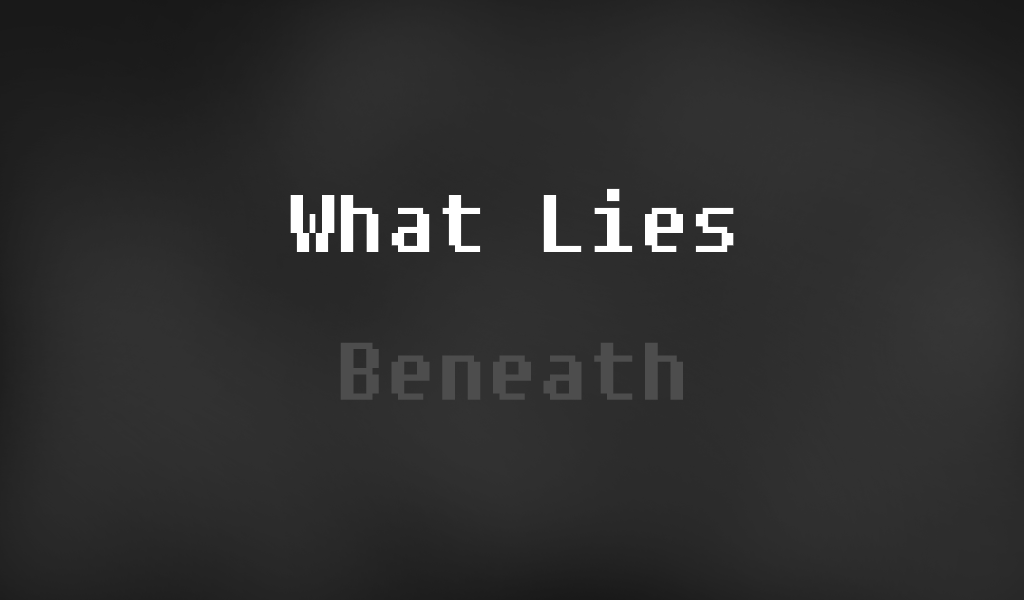
<style>
.page{position:relative;width:1024px;height:600px}
.page>*{position:absolute;margin:0}
.t1{font:81.1px/147.6px "Fixedsys"}
</style>
<div class="page">
<p class="t1" style="left:290px;top:188px;width:444px;height:212px;text-align:center">What Lies<br>Beneath</p>
</div>
